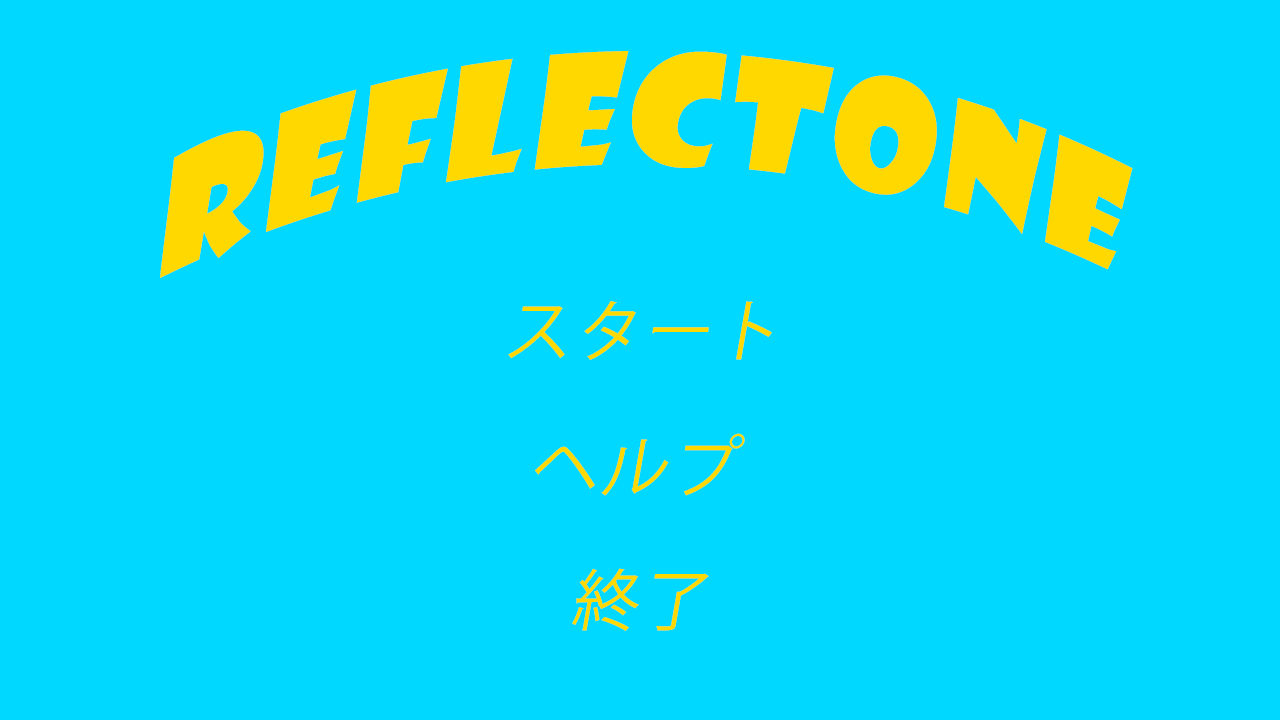
<style>
.page{position:relative;width:1280px;height:720px;background:#00d8ff}
.page>*{position:absolute;margin:0}
.t1{font:150px "ShowcardGothic-Reg";letter-spacing:0.05em;color:#ffd800;font-style:italic}
.t2{font:66.7px "KozGoPr6N-Regular";letter-spacing:0.05em;color:#ffd800;font-style:italic}
</style>
<div class="page">
<p class="t1" style="left:160px;top:51px;width:973px;height:227px">ReflecTone</p>
<p class="t2" style="left:508px;top:301px;width:264px;height:59px">スタート</p>
<p class="t2" style="left:535px;top:433px;width:210px;height:63px">ヘルプ</p>
<p class="t2" style="left:572px;top:568px;width:137px;height:63px">終了</p>
</div>
